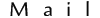
<style>
.page{position:relative;width:100px;height:18px;background:#ffffff}
.page>*{position:absolute;margin:0}
.t1{font:20px "Amira-Roman";letter-spacing:0.6em;color:#000000;scale:1.1 1}
</style>
<div class="page">
<p class="t1" style="left:10px;top:1px;width:79px;height:15px;opacity:0.96">Mail</p>
</div>
